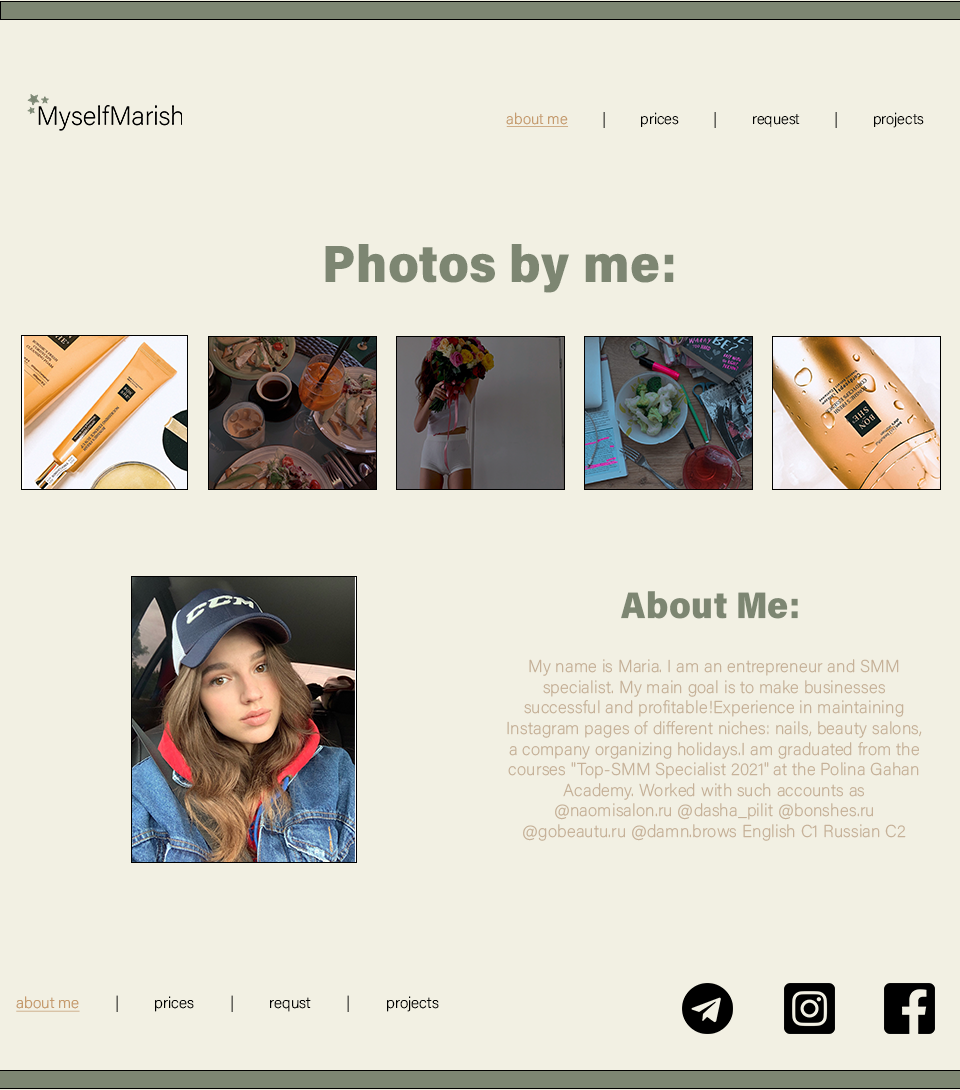
<style>
.page{position:relative;width:960px;height:1090px;background:#f2f0e3}
.page>*{position:absolute;margin:0}
.t1{font:15.2px "AcuminVariableConcept";color:#000000}
.t2{font:15.2px "AcuminVariableConcept";color:#c59b6d;text-decoration:underline}
.t3{font:15.2px "AcuminVariableConcept";letter-spacing:1.4em;color:#000000}
.t4{font:52.6px "AcuminConcept-SemiCondensedBlack";letter-spacing:0.01em;color:#7d8672}
.t5{font:37.1px "AcuminConcept-SemiCondensedBlack";letter-spacing:0.01em;color:#7d8672}
.t6{font:17.2px "AcuminVariableConcept";letter-spacing:0.01em;color:#c6b198}
.t7{font:17.2px "MyriadPro-Regular";letter-spacing:0.01em;color:#c6b198}
.t8{font:15.7px "AcuminVariableConcept";color:#000000}
.t9{font:15.7px "AcuminVariableConcept";color:#c59b6d;text-decoration:underline}
.t10{font:15.7px "AcuminVariableConcept";letter-spacing:1.4em;color:#000000}
</style>
<div class="page">
<p class="t1" style="left:506px;top:112px;width:418px;height:16px"><span class="t2">about me </span>| prices <span class="t3">| </span>request | projects</p>
<p class="t4" style="left:325px;top:244px;width:349px;height:49px">Photos by me:</p>
<p class="t5" style="left:621px;top:591px;width:177px;height:28px">About Me:</p>
<p class="t6" style="left:507px;top:659px;width:415px;height:182px;text-align:center">My name is Maria. I am an entrepreneur and SMM specialist. My main goal is to make businesses successful and profitable!Experience in maintaining Instagram pages of different niches: nails, beauty salons, a company organizing holidays.I am graduated from the courses "Top-SMM Specialist 2021" at the Polina Gahan Academy. Worked with such accounts as @naomisalon.ru @dasha<span class="t7">_</span>pilit @bonshes.ru @gobeautu.ru @damn.brows English C1 Russian C2</p>
<p class="t8" style="left:16px;top:995px;width:423px;height:17px"><span class="t9">about me </span>| prices <span class="t10">| </span>requst | projects</p>
</div>
